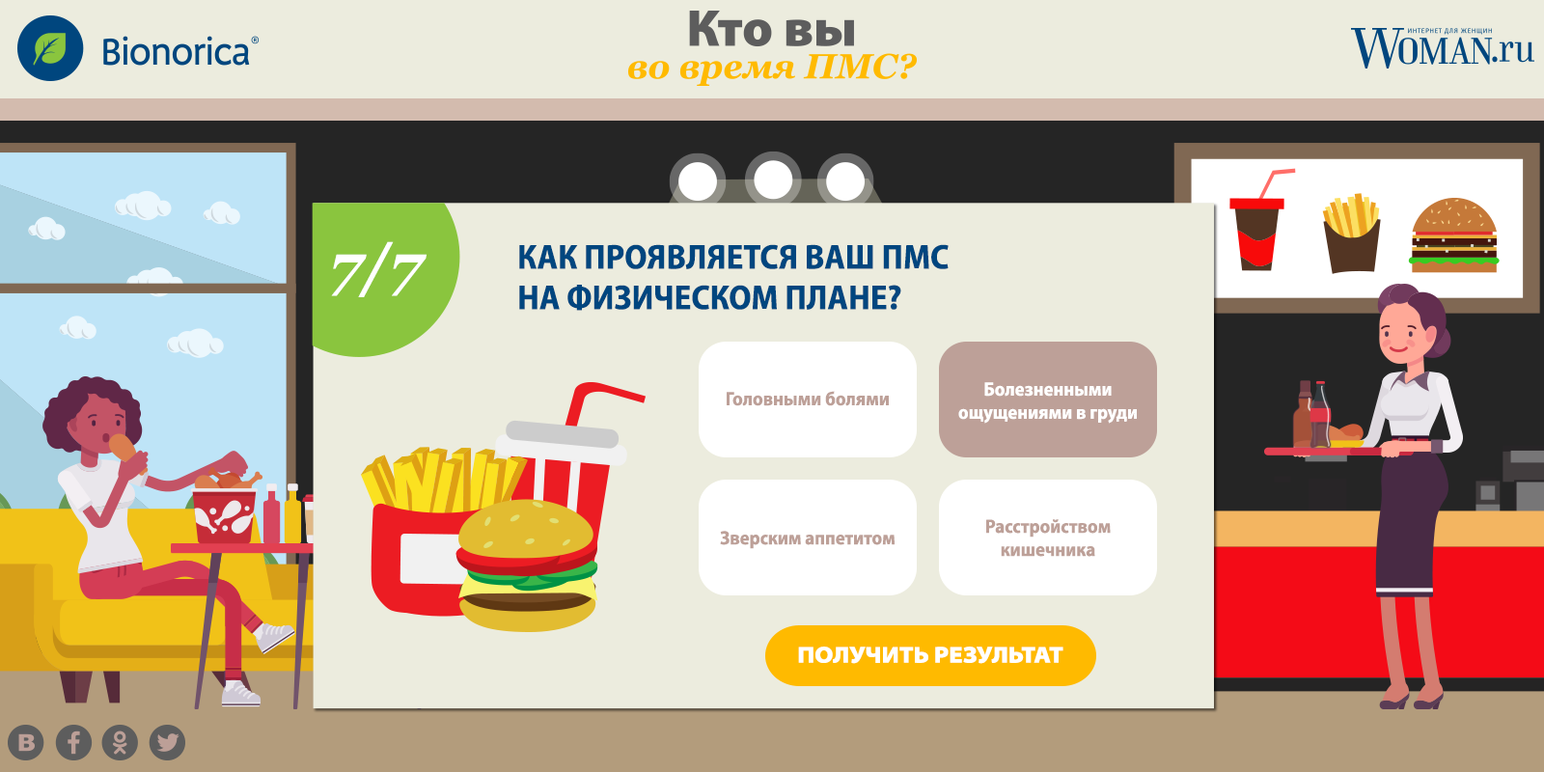
<style>
.page{position:relative;width:1544px;height:772px;background:#ececde}
.page>*{position:absolute;margin:0}
.t1{font:57.9px "Georgia-BoldItalic";color:#ffffff}
.t2{font:34.7px/40.5px "MyriadPro-BoldSemiCn";color:#00467f;text-transform:uppercase}
.t3{font:19.3px "MyriadPro-BoldSemiCn";color:#ffffff}
.t4{font:19.3px "MyriadPro-BoldSemiCn";color:#bda098}
.t5{font:23.2px "MyriadPro-BlackSemiExt";color:#ffffff;text-transform:uppercase}
</style>
<div class="page">
<p class="t1" style="left:331px;top:241px;width:96px;height:56px">7/7</p>
<p class="t2" style="left:519px;top:244px;width:430px;height:67px">Как проявляется ваш ПМС <br>на физическом плане?</p>
<p class="t3" style="left:958px;top:382px;width:179px;height:42px;text-align:center">Болезненными ощущениями в груди</p>
<p class="t4" style="left:727px;top:391px;width:162px;height:15px">Головными болями</p>
<p class="t4" style="left:986px;top:519px;width:125px;height:38px;text-align:center">Расстройством кишечника</p>
<p class="t4" style="left:720px;top:531px;width:175px;height:18px">Зверским аппетитом</p>
<p class="t5" style="left:798px;top:647px;width:266px;height:17px">получить результат</p>
</div>
